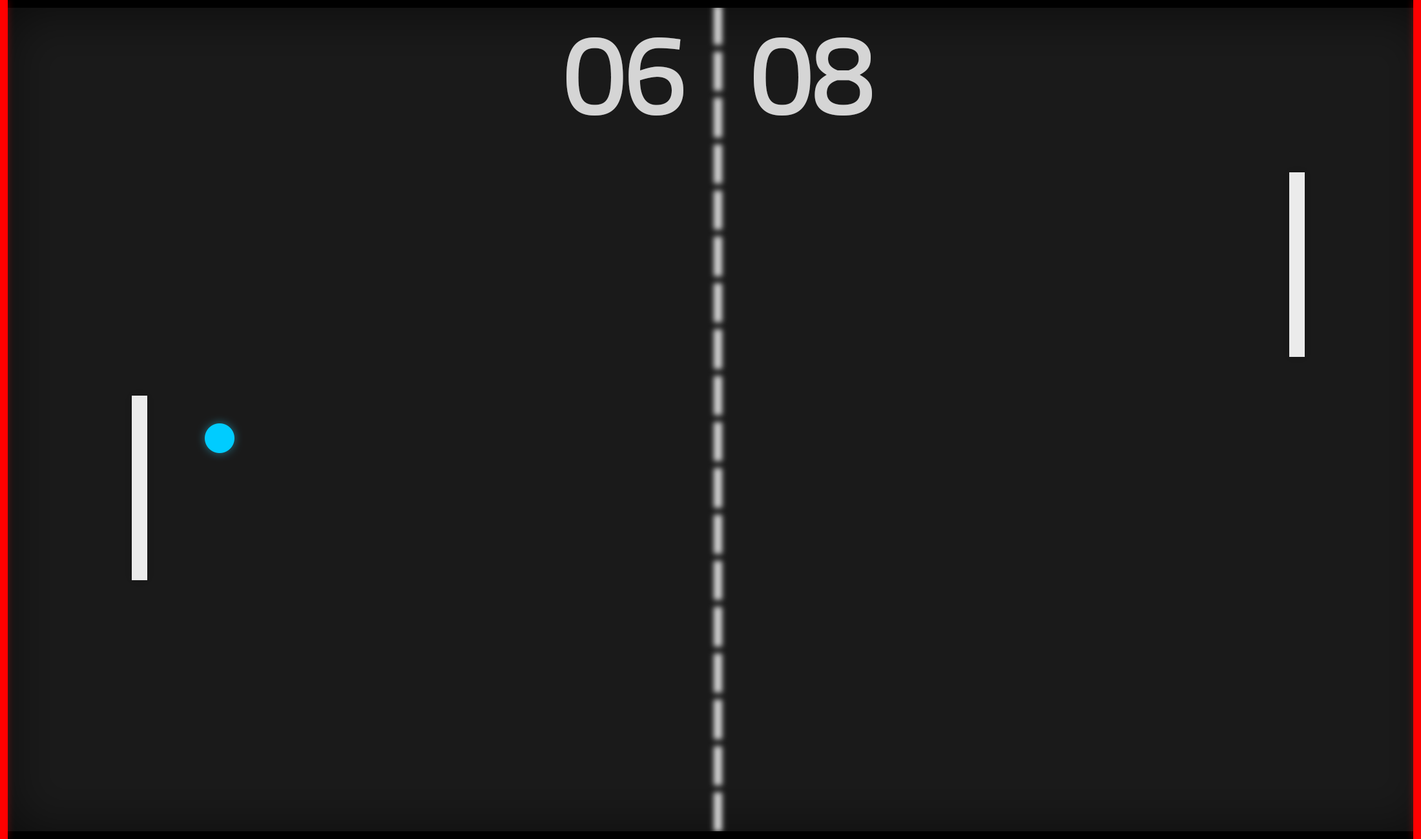
<style>
.page{position:relative;width:1421px;height:839px;background:#1a1a1a}
.page>*{position:absolute;margin:0}
.t1{font:114.5px "TitilliumText25L-600wt";color:#d5d5d5}
</style>
<div class="page">
<p class="t1" style="left:566px;top:37px;width:117px;height:79px">06</p>
<p class="t1" style="left:754px;top:37px;width:118px;height:79px">08</p>
</div>
